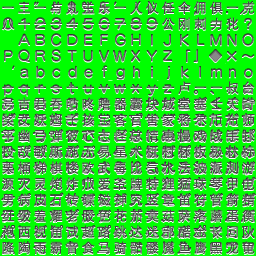
<style>
.page{position:relative;width:256px;height:256px;background:#00ff00}
.page>*{position:absolute;margin:0}
.t1{font:13.3px/16px "DFPHeiW5-GB";letter-spacing:0.202em;color:#444444}
</style>
<div class="page">
<p class="t1" style="left:1px;top:1px;width:254px;height:253px">一三一与丸主乐一人仪任伞佣俱一克<br>八一一一一一一一一一公刚刺力化<br><br><br><br>一一一一一一一一一一一卢一一叔台<br>号吉君吞咕咚噜器囊块城堂塞士天奇<br>奖女妖姆子孩宝客宫害家将尔币布师<br>平幽弓弹彼心志怪总情惠慢戏战手扑<br>投敌敏斯施无易星木机村杯板极林标<br>栗桶梯棋楼欧武毒比气水法波派测游<br>源火灵炮炸爪爱爷牌特狸猛球琴甲电<br>男病皮石砖碟磁神究竖章笛符管箭精<br>红级羞耀老胶色花茄莫菇萨落蘑蛋衡<br>袍西视角试超路跳达迷部酷金长问队<br>降陶雨霸音食马骑骷髅魔鱼鹰黑龙龟</p>
</div>
